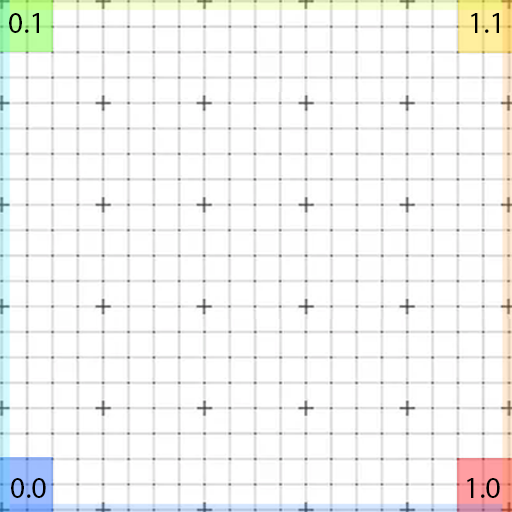
<style>
.page{position:relative;width:512px;height:512px;background:#ffffff}
.page>*{position:absolute;margin:0}
.t1{font:30px "MyriadPro-Regular";color:#000000}
</style>
<div class="page">
<p class="t1" style="left:9px;top:13px;width:30px;height:20px">0.1</p>
<p class="t1" style="left:471px;top:13px;width:28px;height:20px">1.1</p>
<p class="t1" style="left:11px;top:478px;width:35px;height:20px">0.0</p>
<p class="t1" style="left:467px;top:478px;width:33px;height:20px">1.0</p>
</div>
